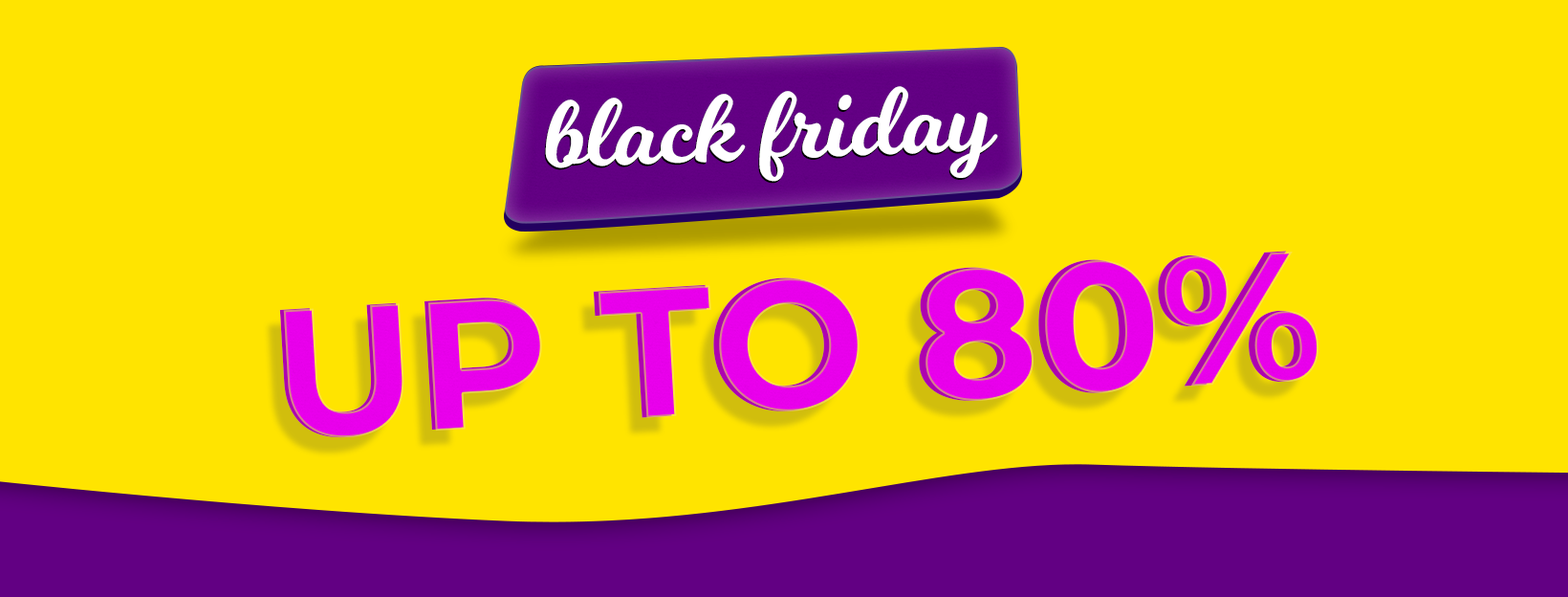
<style>
.page{position:relative;width:1568px;height:597px;background:#ffe400}
.page>*{position:absolute;margin:0}
.t1{font:95.6px "Milkshake";color:#ffffff}
.t2{font:183.6px "Montserrat-Bold";letter-spacing:-0.005em;color:#e700ea;text-transform:uppercase}
.t3{font:182.9px "Montserrat-Bold";color:#fc00ff;text-transform:uppercase}
</style>
<div class="page">
<p class="t1" style="left:544px;top:88px;width:453px;height:96px;rotate:-2deg">black friday</p>
<p class="t1" style="left:545px;top:86px;width:453px;height:96px;rotate:-2deg">black friday</p>
<p class="t2" style="left:279px;top:250px;width:1034px;height:188px;rotate:-3deg">Up to 80%</p>
<p class="t3" style="left:283px;top:251px;width:1036px;height:187px;rotate:-3deg">Up to 80%</p>
</div>
